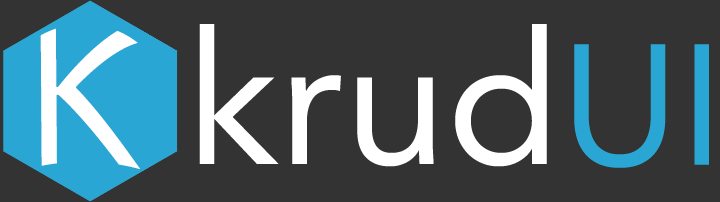
<style>
.page{position:relative;width:720px;height:202px;background:#333333}
.page>*{position:absolute;margin:0}
.t1{font:175px "Avenir-Roman";color:#ffffff}
.t2{font:185px "Avenir-Roman";color:#ffffff}
.t3{font:170px "Avenir-Roman";color:#29a6d3}
</style>
<div class="page">
<p class="t1" style="left:40px;top:28px;width:100px;height:141px">K</p>
<p class="t2" style="left:199px;top:24px;width:348px;height:143px">krud</p>
<p class="t3" style="left:574px;top:44px;width:135px;height:124px">UI</p>
</div>
